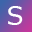
<style>
.page{position:relative;width:32px;height:32px}
.page>*{position:absolute;margin:0}
.t1{font:25px "MSReferenceSansSerif";letter-spacing:-0.03em;color:#ffffff}
</style>
<div class="page">
<p class="t1" style="left:8px;top:6px;width:15px;height:19px">S</p>
</div>
